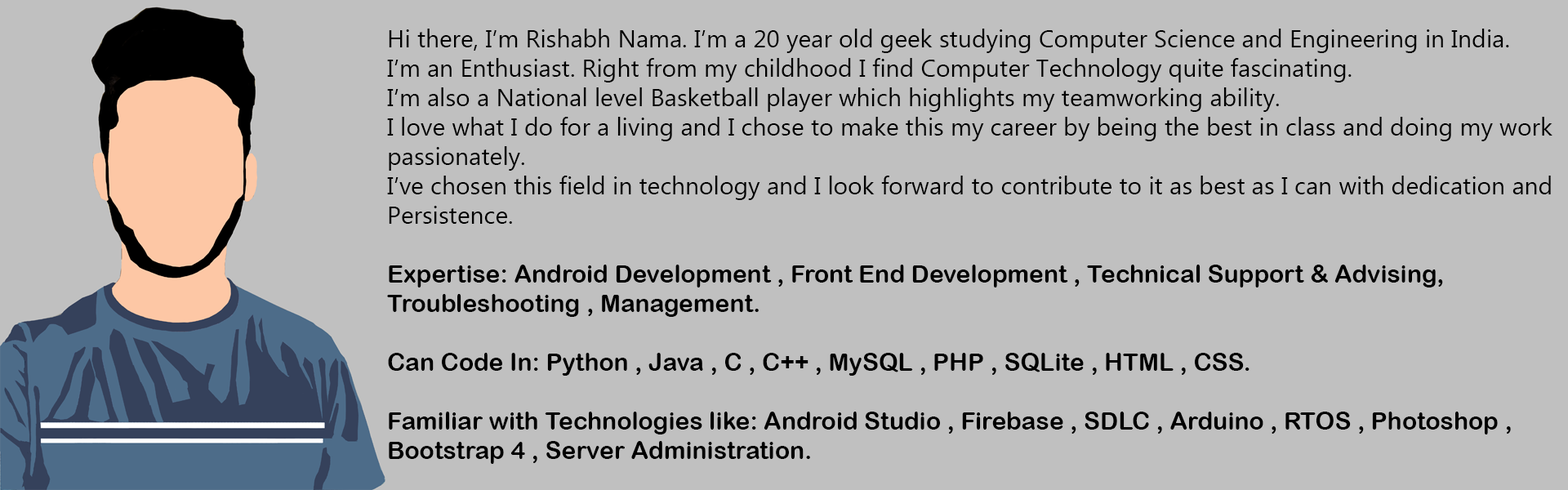
<style>
.page{position:relative;width:1568px;height:490px;background:#c0c0c0}
.page>*{position:absolute;margin:0}
.t1{font:24.5px "MyanmarText";color:#000000}
.t2{font:24.5px "ArialRoundedMTBold";color:#ffffff}
.t3{font:24.5px "ArialRoundedMTBold";color:#000000}
</style>
<div class="page">
<p class="t1" style="left:387px;top:29px;width:1165px;height:435px"><span class="t2"><br></span>Hi there, I’m Rishabh Nama. I’m a 20 year old geek studying Computer Science and Engineering in India. <br>I’m an Enthusiast. Right from my childhood I find Computer Technology quite fascinating.<br>I’m also a National level Basketball player which highlights my teamworking ability.<br>I love what I do for a living and I chose to make this my career by being the best in class and doing my work passionately.<br>I’ve chosen this field in technology and I look forward to contribute to it as best as I can with dedication and Persistence.<br><span class="t3"><br>Expertise: Android Development , Front End Development , Technical Support &amp; Advising, Troubleshooting , Management.<br><br>Can Code In: Python , Java , C , C++ , MySQL , PHP , SQLite , HTML , CSS.<br><br>Familiar with Technologies like: Android Studio , Firebase , SDLC , Arduino , RTOS , Photoshop , Bootstrap 4 , Server Administration.</span></p>
</div>
